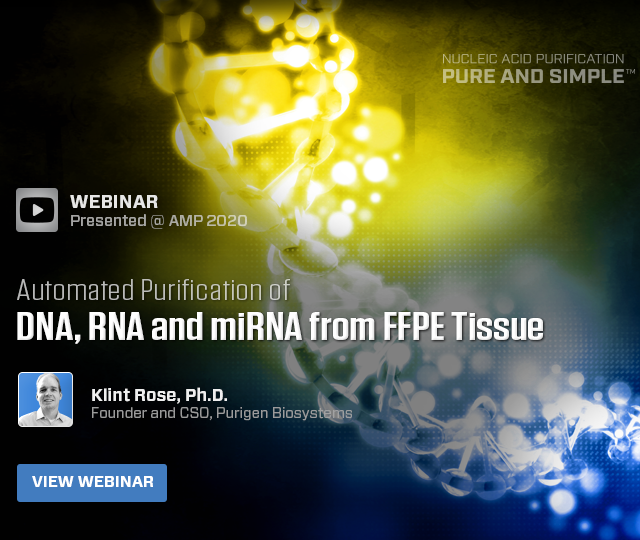
<style>
.page{position:relative;width:640px;height:540px}
.page>*{position:absolute;margin:0}
.t1{font:18.5px "Forza-Bold";letter-spacing:-0.01em;color:#e7e7e6;text-transform:uppercase}
.t2{font:16px "Forza-Medium";letter-spacing:-0.01em;color:#acaca4}
.t3{font:29px "Tungsten-Light";color:#bcbdb9;scale:1.45 1}
.t4{font:39px "Tungsten-Semibold";color:#fefefe;scale:1.31 1}
.t5{font:14.7px/15.1px "Forza-Book";color:#a5a5a5}
.t6{font:17px/15.1px "Forza-Bold";color:#ffffff}
.t7{font:16px "Forza-Bold";letter-spacing:-0.01em;color:#ffffff;text-transform:uppercase}
</style>
<div class="page">
<p class="t1" style="left:70px;top:195px;width:88px;height:13px">Webinar</p>
<p class="t2" style="left:71px;top:214px;width:176px;height:15px">Presented @ AMP 2020</p>
<p class="t3" style="left:17px;top:279px;width:273px;height:21px">Automated Purification of</p>
<p class="t4" style="left:17px;top:312px;width:526px;height:32px">DNA, RNA and miRNA from FFPE Tissue</p>
<p class="t5" style="left:92px;top:387px;width:260px;height:34px;opacity:0.9"><span class="t6">Klint Rose, Ph.D.<br></span>Founder and CSO, Purigen Biosystems</p>
<p class="t7" style="left:32px;top:476px;width:121px;height:11px">VIEW WEBINAR</p>
</div>
